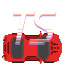
<style>
.page{position:relative;width:64px;height:64px;background:#ffffff}
.page>*{position:absolute;margin:0}
.t1{font:48px "NorthShore";letter-spacing:-0.005em;color:#ffffff}
</style>
<div class="page">
<p class="t1" style="left:13px;top:10px;width:44px;height:33px">TS</p>
</div>
